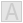
<style>
.page{position:relative;width:23px;height:23px;background:#e5e5e5}
.page>*{position:absolute;margin:0}
.t1{font:25px "SourceSansPro-Regular";color:#cccccc}
</style>
<div class="page">
<p class="t1" style="left:5px;top:3px;width:14px;height:17px">A</p>
</div>
